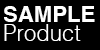
<style>
.page{position:relative;width:100px;height:50px;background:#000000}
.page>*{position:absolute;margin:0}
.t1{font:22.8px/18.9px "Helvetica-Light";color:#ffffff}
.t2{font:22.8px/18.9px "Helvetica-Bold";color:#ffffff}
</style>
<div class="page">
<p class="t1" style="left:4px;top:6px;width:91px;height:35px"><span class="t2">SAMPLE <br></span>Product</p>
</div>
